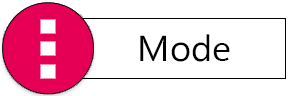
<style>
.page{position:relative;width:289px;height:96px;background:#ffffff}
.page>*{position:absolute;margin:0}
.t1{font:36px "SegoeUIVariable";color:#000000}
</style>
<div class="page">
<p class="t1" style="left:140px;top:34px;width:90px;height:28px">Mode</p>
</div>
